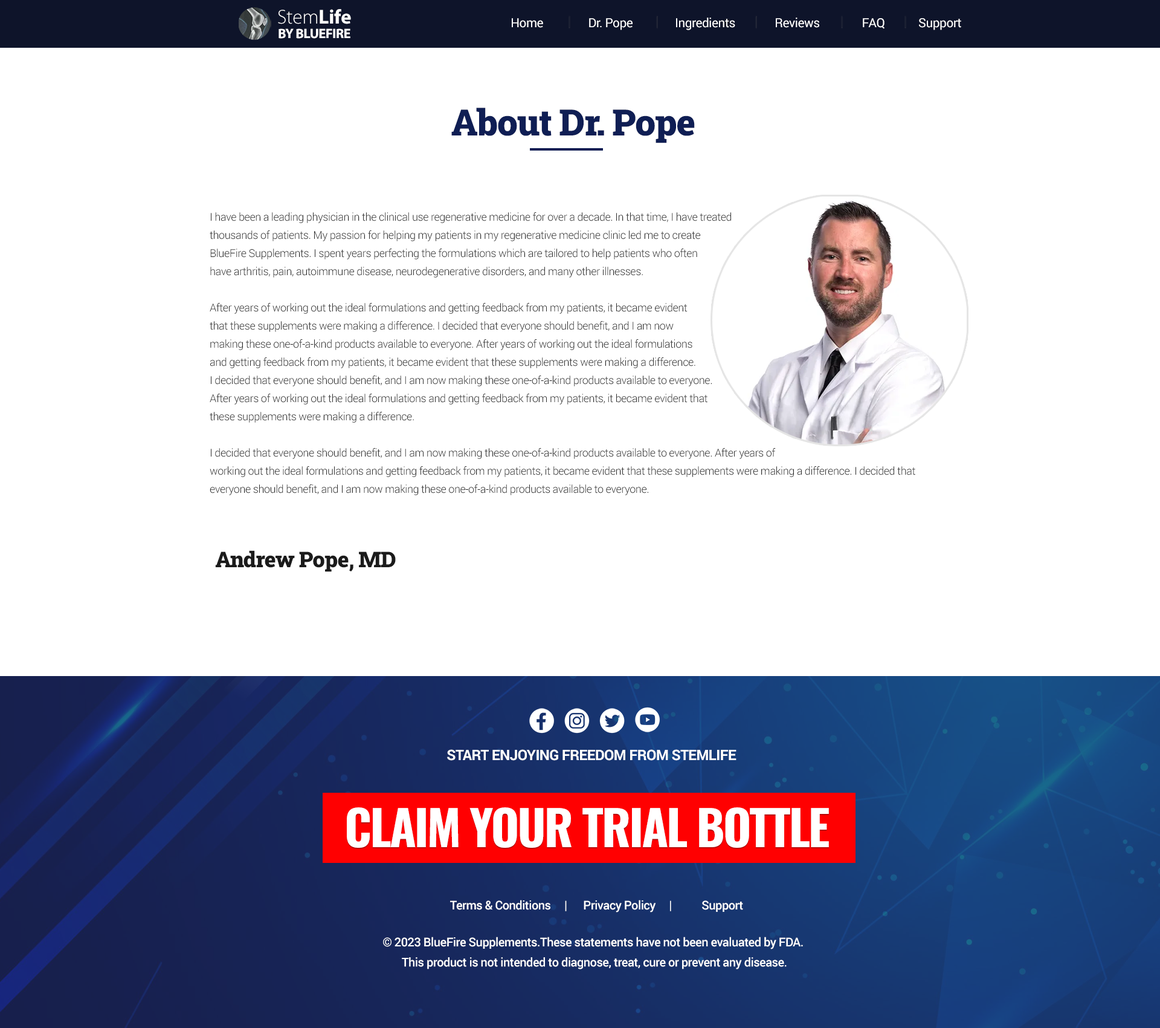
<style>
.page{position:relative;width:1160px;height:1028px;background:#ffffff}
.page>*{position:absolute;margin:0}
.t1{font:20.1px "MyriadPro-Light";letter-spacing:-0.005em;color:#ffffff}
.t2{font:20.1px "MyriadPro-Bold";letter-spacing:-0.005em;color:#ffffff}
.t3{font:12.6px "Roboto-Regular";letter-spacing:-0.025em;color:#ffffff}
.t4{font:13.6px "MyriadPro-Bold";letter-spacing:-0.025em;color:#ffffff;text-transform:uppercase}
.t5{font:36.3px "RobotoSlab-Black";letter-spacing:-0.025em;color:#0f1e54}
.t6{font:10.9px/18.1px "Roboto-Light";letter-spacing:-0.025em;color:#2a2a2a}
.t7{font:21.8px "RobotoSlab-Black";letter-spacing:-0.025em;color:#1b1b1b}
.t8{font:14.5px "Roboto-Bold";letter-spacing:-0.025em;color:#fffffe;text-transform:uppercase}
.t9{font:48.4px "Oswald-Bold";letter-spacing:-0.035em;color:#ffffff;text-transform:uppercase}
.t10{font:12.1px "Roboto-Medium";letter-spacing:-0.025em;color:#fffffe}
.t11{font:12.1px/20.1px "Roboto-Medium";letter-spacing:-0.025em;color:#fffffe}
</style>
<div class="page">
<p class="t1" style="left:278px;top:9px;width:73px;height:15px">Stem<span class="t2">Life</span></p>
<p class="t3" style="left:512px;top:18px;width:450px;height:12px">Home                Dr. Pope               Ingredients              Reviews               FAQ            Support</p>
<p class="t4" style="left:279px;top:28px;width:72px;height:11px">By Bluefire</p>
<p class="t5" style="left:452px;top:108px;width:243px;height:35px">About Dr. Pope</p>
<p class="t6" style="left:210px;top:212px;width:706px;height:283px">I have been a leading physician in the clinical use regenerative medicine for over a decade. In that time, I have treated <br>thousands of patients. My passion for helping my patients in my regenerative medicine clinic led me to create <br>BlueFire Supplements. I spent years perfecting the formulations which are tailored to help patients who often <br>have arthritis, pain, autoimmune disease, neurodegenerative disorders, and many other illnesses. <br><br>​After years of working out the ideal formulations and getting feedback from my patients, it became evident <br>that these supplements were making a difference. I decided that everyone should benefit, and I am now <br>making these one-of-a-kind products available to everyone. ​After years of working out the ideal formulations <br>and getting feedback from my patients, it became evident that these supplements were making a difference. <br>I decided that everyone should benefit, and I am now making these one-of-a-kind products available to everyone.<br>After years of working out the ideal formulations and getting feedback from my patients, it became evident that <br>these supplements were making a difference. <br><br>I decided that everyone should benefit, and I am now making these one-of-a-kind products available to everyone. ​After years of <br>working out the ideal formulations and getting feedback from my patients, it became evident that these supplements were making a difference. I decided that <br>everyone should benefit, and I am now making these one-of-a-kind products available to everyone.</p>
<p class="t7" style="left:215px;top:550px;width:181px;height:22px">Andrew Pope, MD</p>
<p class="t8" style="left:447px;top:749px;width:290px;height:11px">Start Enjoying Freedom From Stemlife</p>
<p class="t9" style="left:347px;top:807px;width:482px;height:40px">Claim Your Trial Bottle</p>
<p class="t10" style="left:450px;top:899px;width:293px;height:13px">Terms &amp; Conditions     |      Privacy Policy     |           Support</p>
<p class="t11" style="left:383px;top:936px;width:420px;height:33px;text-align:center">© 2023 BlueFire Supplements.These statements have not been evaluated by FDA. <br>This product is not intended to diagnose, treat, cure or prevent any disease.</p>
</div>
